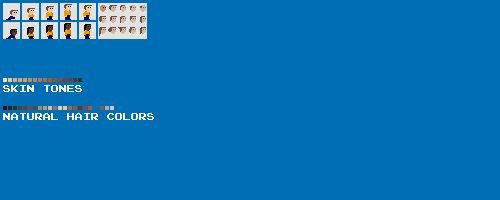
<style>
.page{position:relative;width:500px;height:200px;background:#006eb4}
.page>*{position:absolute;margin:0}
.t1{font:8px "PressStartK";color:#ffffff}
</style>
<div class="page">
<p class="t1" style="left:3px;top:85px;width:79px;height:7px">SKIN TONES</p>
<p class="t1" style="left:3px;top:113px;width:151px;height:7px">NATURAL HAIR COLORS</p>
</div>
